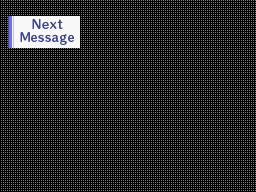
<style>
.page{position:relative;width:256px;height:192px;background:#000000}
.page>*{position:absolute;margin:0}
.t1{font:11.6px "HummingStd-B";letter-spacing:0.075em;color:#404888;scale:0.95 1}
.t2{font:11.6px "HummingStd-B";letter-spacing:0.01em;color:#404888;scale:0.95 1}
</style>
<div class="page">
<p class="t1" style="left:20px;top:18px;width:54px;height:27px;text-align:center">Next<br><span class="t2">Me</span>ssage</p>
</div>
